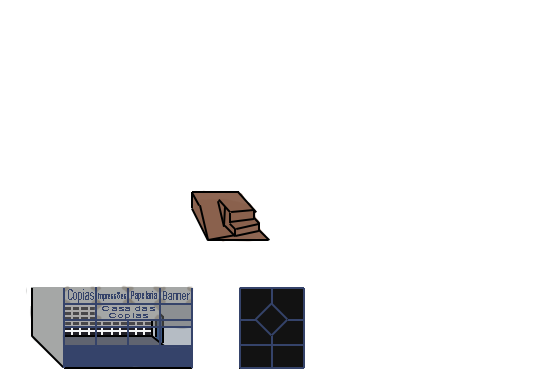
<style>
.page{position:relative;width:544px;height:384px;background:#ffffff}
.page>*{position:absolute;margin:0}
.t1{font:14.7px "ArialMT";color:#35436a;scale:0.59 1}
.t2{font:8.5px "ArialMT";color:#35436a;scale:0.7 1}
.t3{font:11.5px "ArialMT";color:#35436a;scale:0.55 1}
.t4{font:12.1px "ArialMT";color:#35436a;scale:0.71 1}
</style>
<div class="page">
<p class="t1" style="left:68px;top:289px;width:26px;height:14px">Copias</p>
<p class="t2" style="left:98px;top:292px;width:28px;height:9px">Impressões</p>
<p class="t3" style="left:131px;top:291px;width:26px;height:10px">Papelaria</p>
<p class="t4" style="left:163px;top:291px;width:27px;height:9px">Banner</p>
</div>
